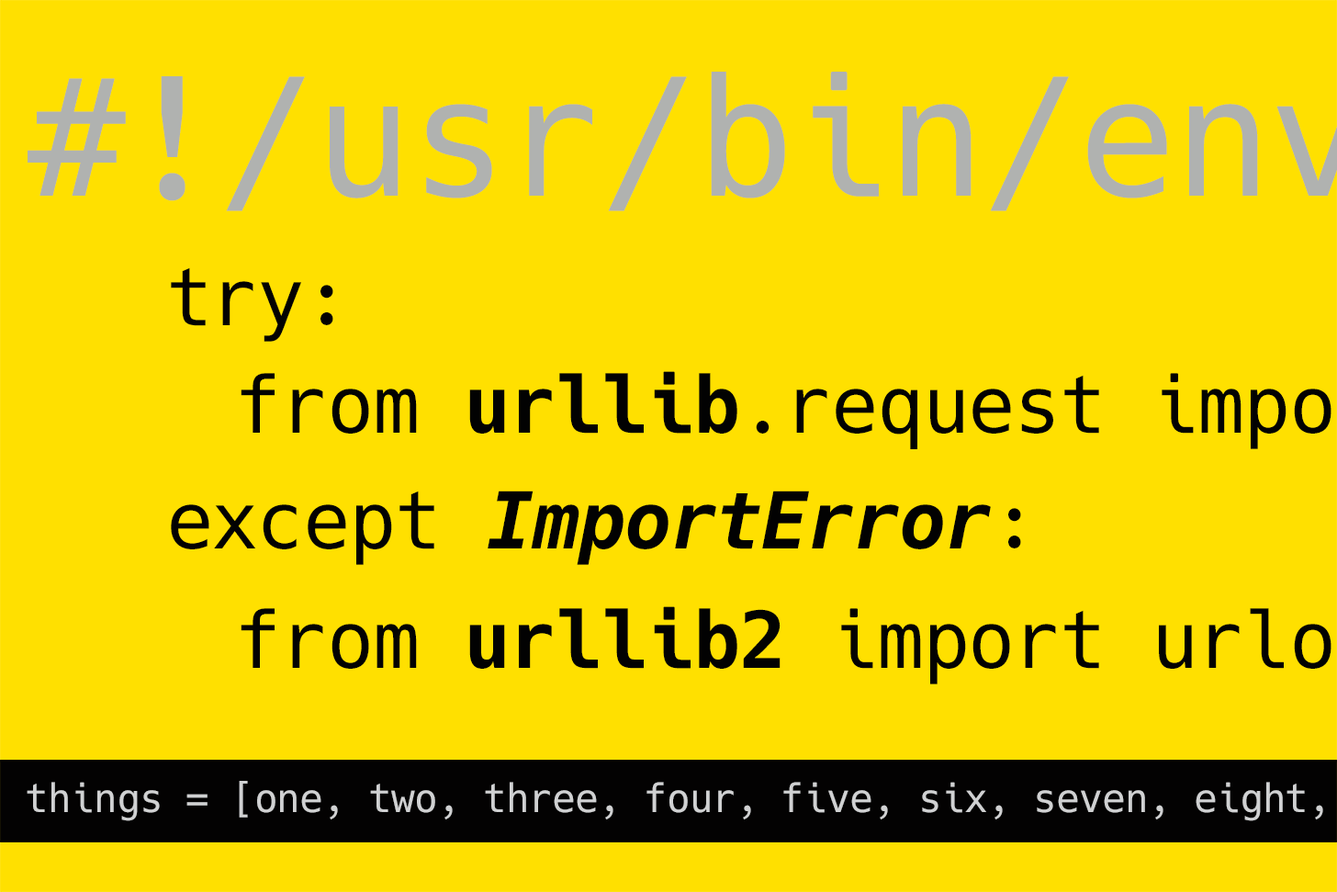
<style>
.page{position:relative;width:1337px;height:892px;background:#ffe000}
.page>*{position:absolute;margin:0}
.t1{font:78.3px "Hack-Regular";letter-spacing:-0.015em;color:#020202}
.t2{font:78.3px "Hack-Bold";letter-spacing:-0.015em;color:#020202}
.t3{font:78.3px "Hack-BoldOblique";letter-spacing:-0.015em;color:#020202}
.t4{font:39.2px "Hack-Regular";letter-spacing:-0.015em;color:#d0d1d2}
</style>
<div class="page">
<p class="t1" style="left:171px;top:267px;width:162px;height:75px">try:</p>
<p class="t1" style="left:241px;top:371px;width:1091px;height:78px">from <span class="t2">urllib</span>.request impo</p>
<p class="t3" style="left:171px;top:490px;width:850px;height:75px"><span class="t1">except </span>ImportError<span class="t1">:</span></p>
<p class="t1" style="left:241px;top:606px;width:1091px;height:78px">from <span class="t2">urllib2</span> import urlo</p>
<p class="t4" style="left:27px;top:781px;width:1296px;height:40px">things = [one, two, three, four, five, six, seven, eight,</p>
</div>
